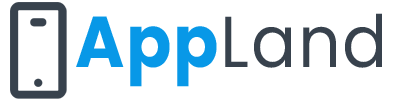
<style>
.page{position:relative;width:400px;height:100px;background:#ffffff}
.page>*{position:absolute;margin:0}
.t1{font:72px "Poppins-Regular";letter-spacing:0.025em;color:#38424d;scale:0.93 1}
.t2{font:72px "Poppins-Bold";letter-spacing:0.025em;color:#0898e7;scale:0.93 1}
</style>
<div class="page">
<p class="t1" style="left:76px;top:13px;width:306px;height:74px"><span class="t2">App</span>Land</p>
</div>
